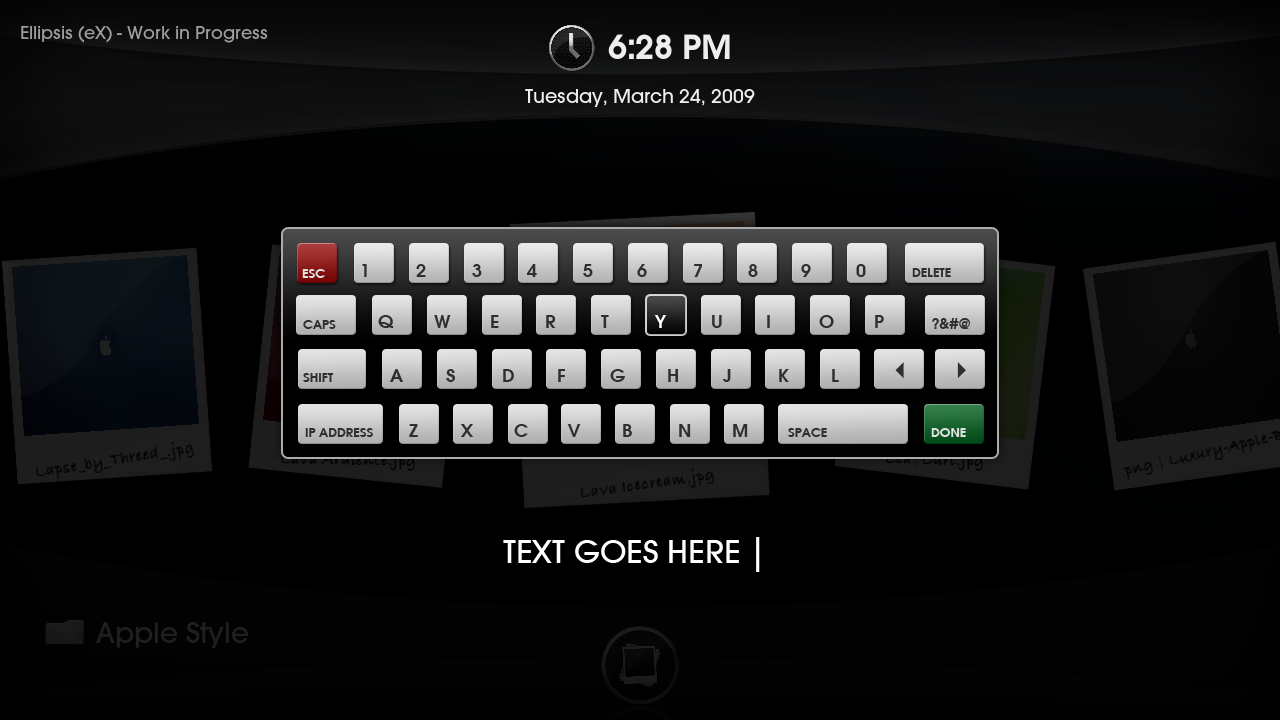
<style>
.page{position:relative;width:1280px;height:720px;background:#000000}
.page>*{position:absolute;margin:0}
.t1{font:14px "AvantGardeITCTTDemi";color:#e0e0e0}
.t2{font:20px "AvantGardeITCTTDemi";color:#2f2f2f}
.t3{font:14px "AvantGardeITCTTDemi";color:#2f2f2f}
.t4{font:20px "AvantGardeITCTTDemi";color:#ffffff}
.t5{font:16px "AvantGardeITCTTDemi";color:#2f2f2f}
.t6{font:34.8px "AvantGardeMdITCTT";color:#fefefe}
</style>
<div class="page">
<p class="t1" style="left:302px;top:269px;width:23px;height:9px">ESC</p>
<p class="t2" style="left:362px;top:264px;width:5px;height:13px">1</p>
<p class="t2" style="left:416px;top:264px;width:10px;height:13px">2</p>
<p class="t2" style="left:472px;top:264px;width:10px;height:13px">3</p>
<p class="t2" style="left:527px;top:264px;width:10px;height:13px">4</p>
<p class="t2" style="left:583px;top:264px;width:10px;height:13px">5</p>
<p class="t2" style="left:637px;top:264px;width:10px;height:13px">6</p>
<p class="t2" style="left:694px;top:264px;width:8px;height:13px">7</p>
<p class="t2" style="left:748px;top:264px;width:10px;height:13px">8</p>
<p class="t2" style="left:801px;top:264px;width:10px;height:13px">9</p>
<p class="t2" style="left:856px;top:264px;width:10px;height:13px">0</p>
<p class="t3" style="left:912px;top:268px;width:39px;height:9px">DELETE</p>
<p class="t2" style="left:378px;top:315px;width:16px;height:13px">Q</p>
<p class="t2" style="left:434px;top:315px;width:17px;height:13px">W</p>
<p class="t2" style="left:491px;top:315px;width:8px;height:13px">E</p>
<p class="t2" style="left:546px;top:315px;width:10px;height:13px">R</p>
<p class="t2" style="left:601px;top:315px;width:8px;height:13px">T</p>
<p class="t4" style="left:654px;top:315px;width:13px;height:13px">Y</p>
<p class="t2" style="left:712px;top:315px;width:10px;height:13px">U</p>
<p class="t2" style="left:767px;top:315px;width:3px;height:13px">I</p>
<p class="t2" style="left:819px;top:315px;width:15px;height:13px">O</p>
<p class="t2" style="left:875px;top:315px;width:9px;height:13px">P</p>
<p class="t5" style="left:932px;top:318px;width:38px;height:11px">?&amp;#@</p>
<p class="t3" style="left:303px;top:320px;width:33px;height:9px">CAPS</p>
<p class="t3" style="left:303px;top:373px;width:31px;height:9px">SHIFT</p>
<p class="t2" style="left:390px;top:369px;width:13px;height:13px">A</p>
<p class="t2" style="left:446px;top:369px;width:9px;height:13px">S</p>
<p class="t2" style="left:503px;top:369px;width:11px;height:13px">D</p>
<p class="t2" style="left:558px;top:369px;width:7px;height:13px">F</p>
<p class="t2" style="left:610px;top:369px;width:15px;height:13px">G</p>
<p class="t2" style="left:668px;top:369px;width:10px;height:13px">H</p>
<p class="t2" style="left:723px;top:369px;width:8px;height:13px">J</p>
<p class="t2" style="left:779px;top:369px;width:10px;height:13px">K</p>
<p class="t2" style="left:832px;top:369px;width:7px;height:13px">L</p>
<p class="t2" style="left:409px;top:424px;width:9px;height:13px">Z</p>
<p class="t2" style="left:460px;top:424px;width:13px;height:13px">X</p>
<p class="t2" style="left:514px;top:424px;width:14px;height:13px">C</p>
<p class="t2" style="left:567px;top:424px;width:14px;height:13px">V</p>
<p class="t2" style="left:623px;top:424px;width:9px;height:13px">B</p>
<p class="t2" style="left:679px;top:424px;width:12px;height:13px">N</p>
<p class="t2" style="left:733px;top:424px;width:15px;height:13px">M</p>
<p class="t3" style="left:305px;top:428px;width:68px;height:9px">IP ADDRESS</p>
<p class="t3" style="left:788px;top:428px;width:39px;height:9px">SPACE</p>
<p class="t1" style="left:931px;top:428px;width:35px;height:9px">DONE</p>
<p class="t6" style="left:503px;top:537px;width:257px;height:35px">TEXT GOES HERE |</p>
</div>
